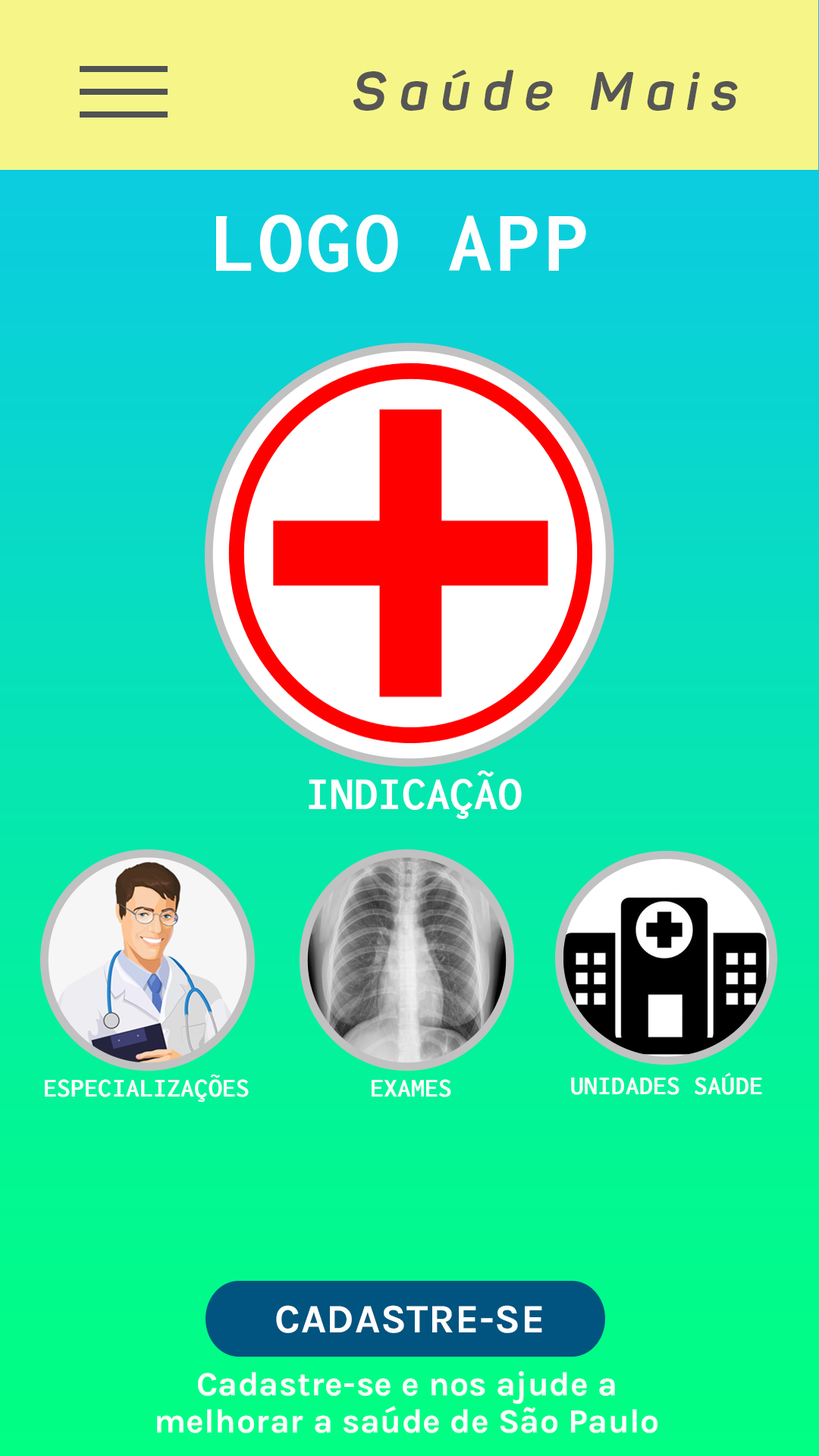
<style>
.page{position:relative;width:819px;height:1456px}
.page>*{position:absolute;margin:0}
.t1{font:53.9px "Panton-BoldItalic";letter-spacing:0.23em;color:#565656}
.t2{font:87.6px "Inconsolata-Bold";letter-spacing:0.05em;color:#fefefe}
.t3{font:47.2px "Inconsolata-Bold";letter-spacing:0.01em;color:#fefefe}
.t4{font:27px "Inconsolata-Bold";letter-spacing:0.01em;color:#fefefe}
.t5{font:40.4px "Karla-Bold";letter-spacing:0.01em;color:#fefefe}
.t6{font:33.7px/37.1px "Karla-Bold";letter-spacing:0.01em;color:#fefefe}
</style>
<div class="page">
<p class="t1" style="left:353px;top:70px;width:385px;height:41px">Saúde Mais</p>
<p class="t2" style="left:216px;top:215px;width:370px;height:57px">LOGO APP</p>
<p class="t3" style="left:309px;top:770px;width:213px;height:49px">INDICAÇÃO</p>
<p class="t4" style="left:571px;top:1072px;width:191px;height:23px">UNIDADES SAÚDE</p>
<p class="t4" style="left:45px;top:1075px;width:204px;height:27px">ESPECIALIZAÇÕES</p>
<p class="t4" style="left:372px;top:1079px;width:79px;height:18px">EXAMES</p>
<p class="t5" style="left:276px;top:1305px;width:266px;height:28px">CADASTRE-SE</p>
<p class="t6" style="left:157px;top:1371px;width:500px;height:62px;text-align:center">Cadastre-se e nos ajude a<br>melhorar a saúde de São Paulo</p>
</div>
